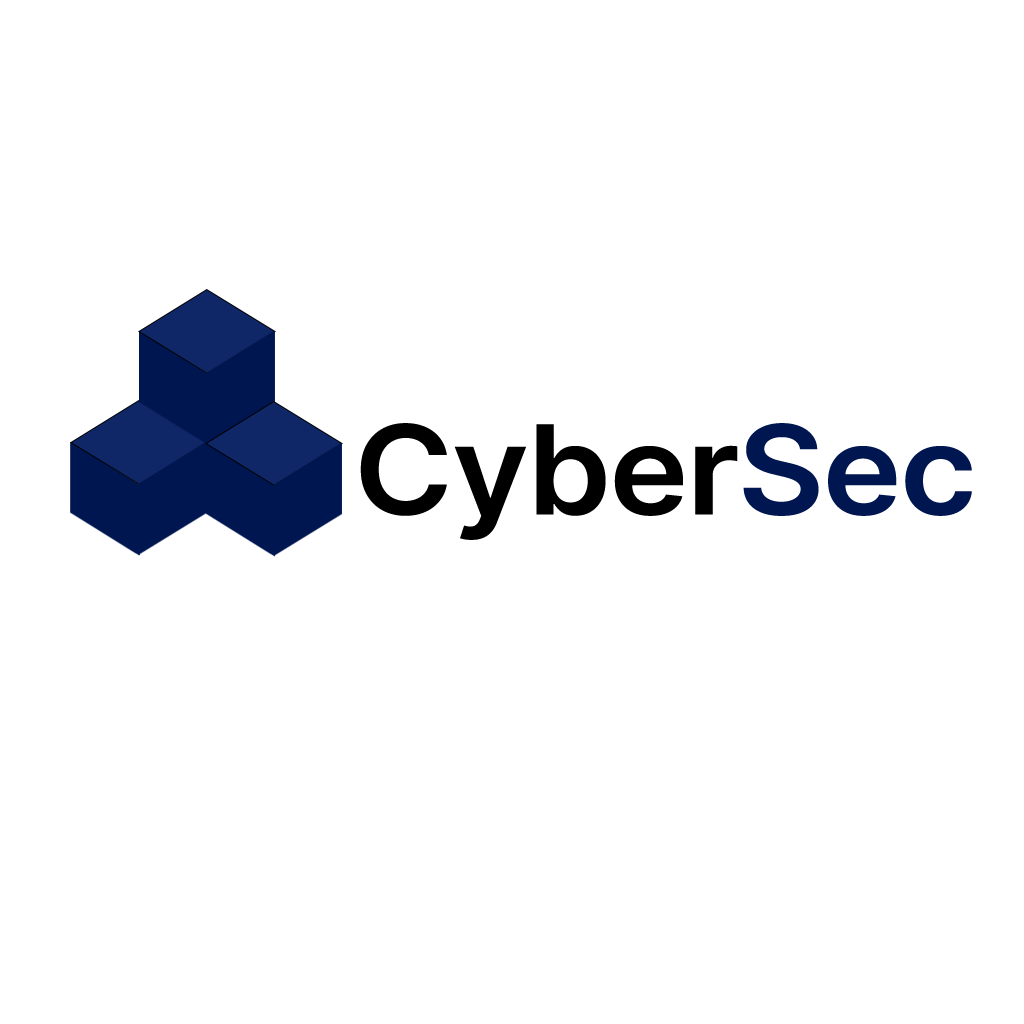
<style>
.page{position:relative;width:1024px;height:1024px;background:#ffffff}
.page>*{position:absolute;margin:0}
.t1{font:123.8px "Inter-SemiBold";letter-spacing:-0.015em;color:#000000;scale:1.08 1}
.t2{font:123.8px "Inter-SemiBold";letter-spacing:-0.015em;color:#001650;scale:1.08 1}
</style>
<div class="page">
<p class="t1" style="left:360px;top:423px;width:612px;height:117px">Cyber<span class="t2">Sec</span></p>
</div>
